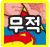
<style>
.page{position:relative;width:50px;height:47px}
.page>*{position:absolute;margin:0}
.t1{font:19.3px "BMJUA";letter-spacing:0.06em;color:#ffffff}
</style>
<div class="page">
<p class="t1" style="left:9px;top:16px;width:31px;height:17px">무적</p>
</div>
